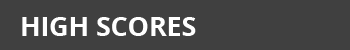
<style>
.page{position:relative;width:350px;height:50px;background:#404040}
.page>*{position:absolute;margin:0}
.t1{font:26.7px "OpenSans-Bold";color:#ffffff}
</style>
<div class="page">
<p class="t1" style="left:22px;top:17px;width:174px;height:19px">HIGH SCORES</p>
</div>
